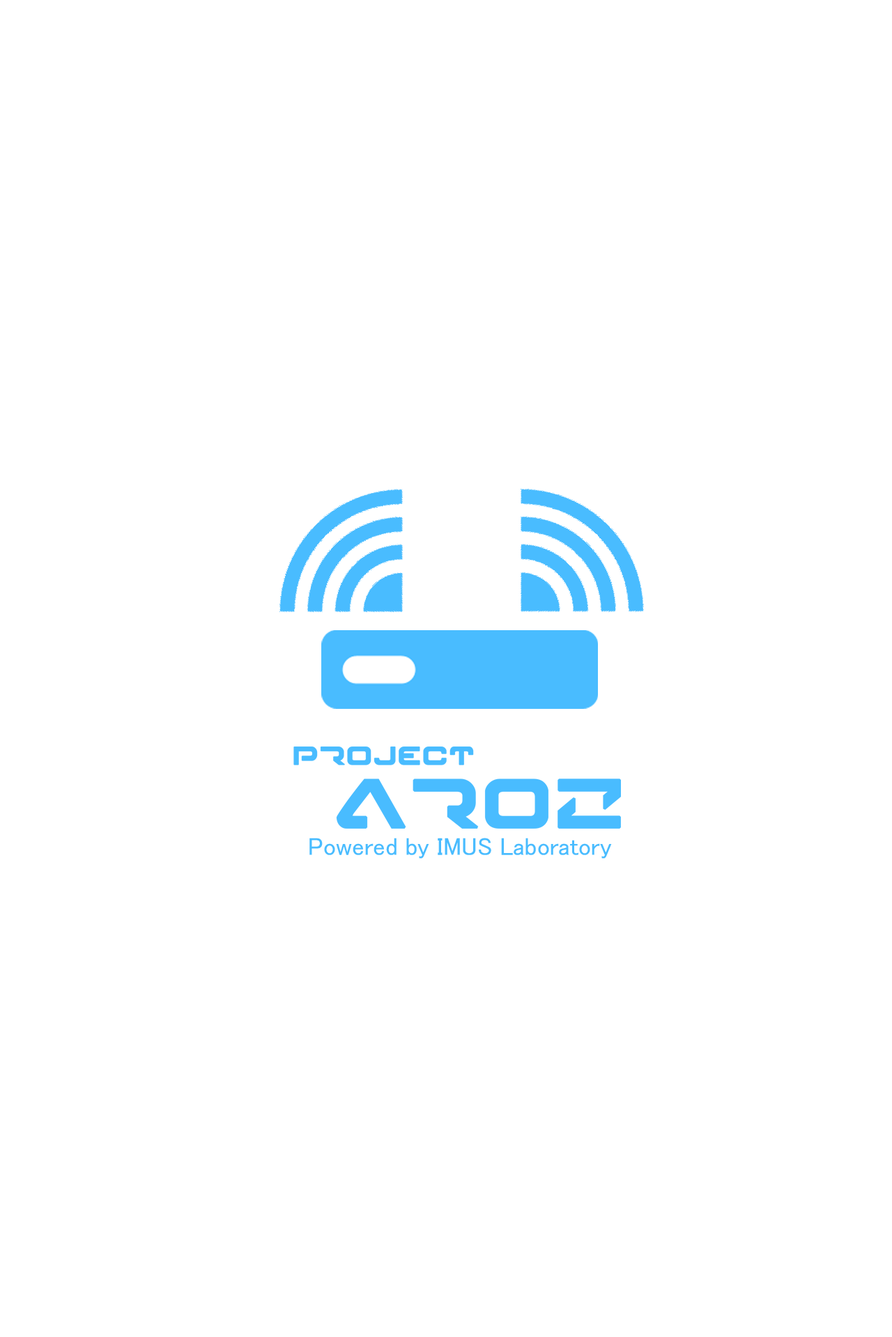
<style>
.page{position:relative;width:892px;height:1337px;background:#ffffff}
.page>*{position:absolute;margin:0}
.t1{font:24.7px "MS-PGothic";color:#49bcff}
</style>
<div class="page">
<p class="t1" style="left:309px;top:838px;width:303px;height:21px">Powered by IMUS Laboratory</p>
</div>
